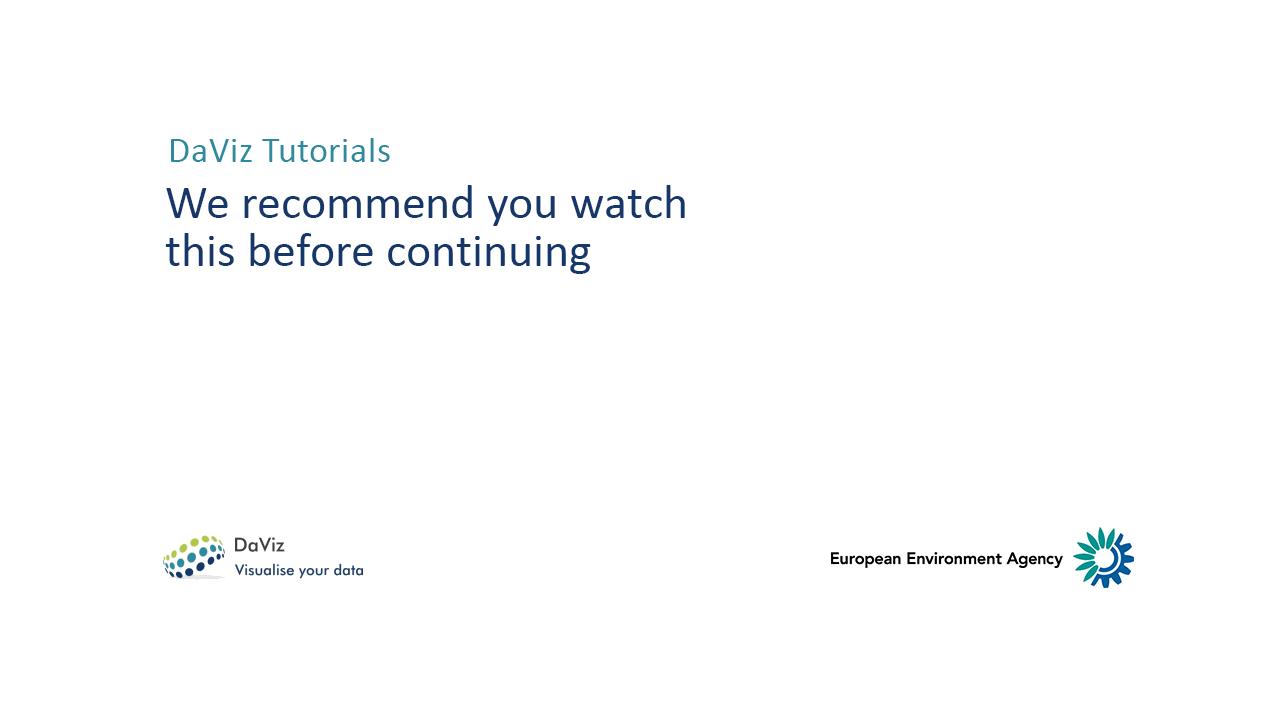
<style>
.page{position:relative;width:1280px;height:720px;background:#ffffff}
.page>*{position:absolute;margin:0}
.t1{font:36px "Calibri";letter-spacing:0.01em;color:#2e8a9d}
.t2{font:48px/48px "Calibri";letter-spacing:0.01em;color:#15376a}
</style>
<div class="page">
<p class="t1" style="left:171px;top:138px;width:219px;height:24px">DaViz Tutorials</p>
<p class="t2" style="left:165px;top:185px;width:520px;height:89px">We recommend you watch this before continuing</p>
</div>
